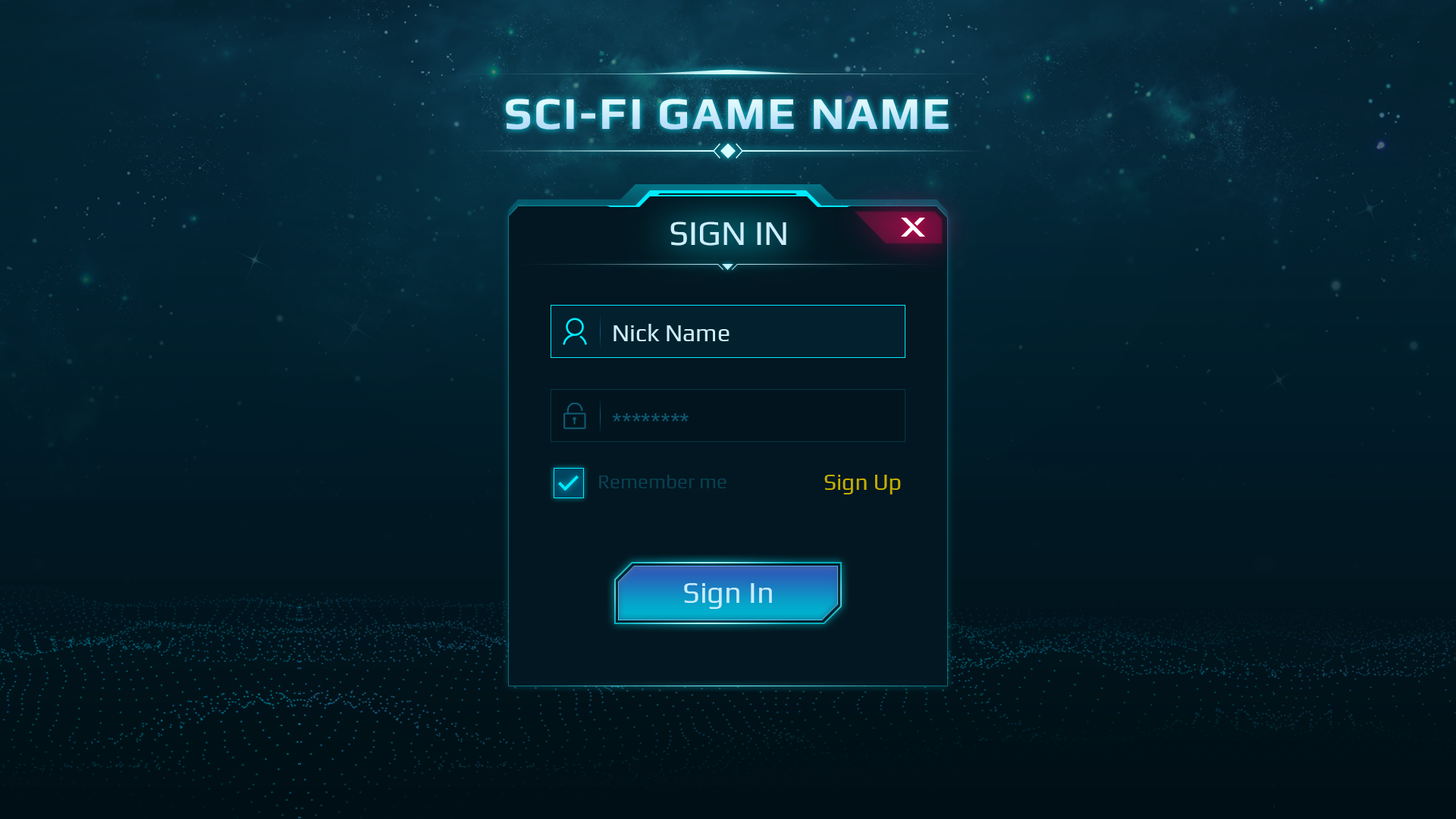
<style>
.page{position:relative;width:1456px;height:819px}
.page>*{position:absolute;margin:0}
.t1{font:45.5px "Play-Bold";letter-spacing:0.05em;color:#cbecfb}
.t2{font:34.9px "Play-Regular";color:#cceffe}
.t3{font:24.3px "Play-Regular";color:#cceffe}
.t4{font:24.3px "Play-Regular";color:#105870}
.t5{font:19.7px "Play-Regular";color:#0a3f51}
.t6{font:22.7px "Play-Regular";color:#c3ae00}
.t7{font:30.3px "Play-Regular";color:#c6edff}
</style>
<div class="page">
<p class="t1" style="left:506px;top:99px;width:443px;height:31px">SCI-FI GAME NAME</p>
<p class="t2" style="left:670px;top:221px;width:116px;height:25px">SIGN IN</p>
<p class="t3" style="left:613px;top:324px;width:117px;height:17px">Nick Name</p>
<p class="t4" style="left:612px;top:413px;width:77px;height:9px">********</p>
<p class="t5" style="left:599px;top:475px;width:127px;height:13px">Remember me</p>
<p class="t6" style="left:824px;top:475px;width:77px;height:19px">Sign Up</p>
<p class="t7" style="left:684px;top:583px;width:88px;height:26px">Sign In</p>
</div>
